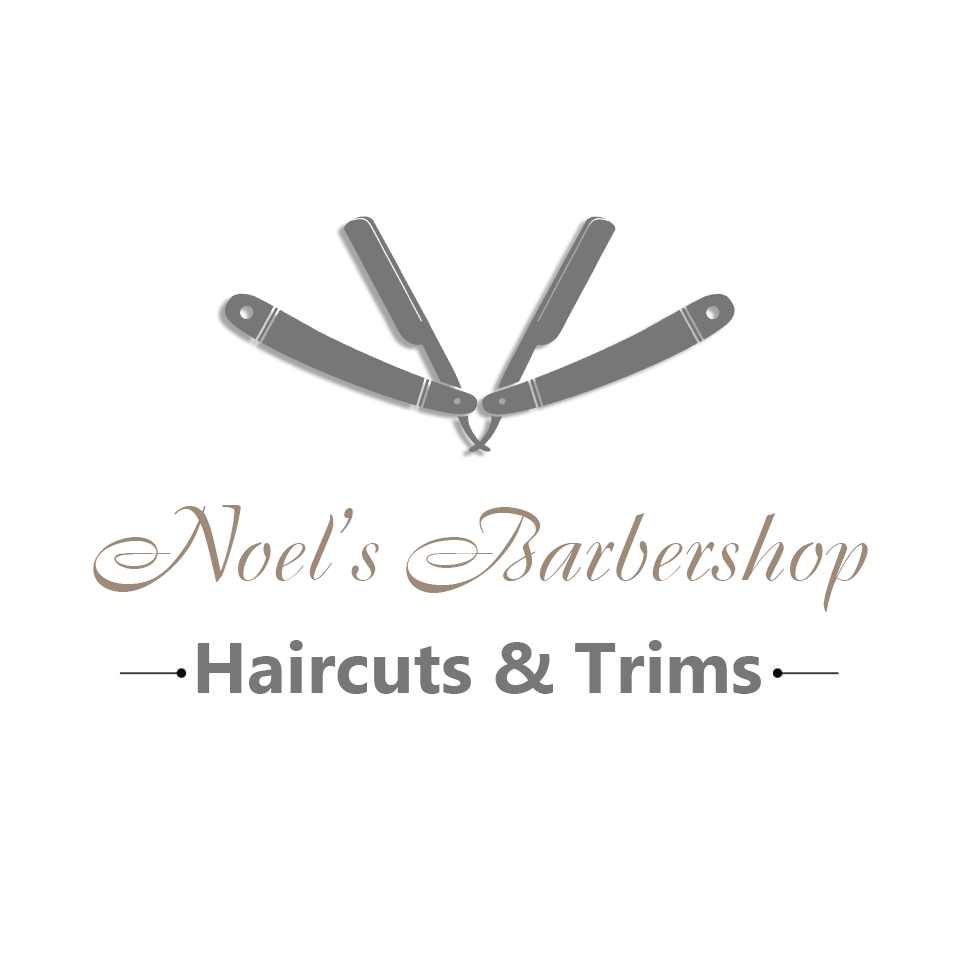
<style>
.page{position:relative;width:960px;height:959px;background:#ffffff}
.page>*{position:absolute;margin:0}
.t1{font:100px "Boulevard";color:#9e8a78}
.t2{font:72px "Gadugi-Bold";color:#777777}
</style>
<div class="page">
<p class="t1" style="left:93px;top:505px;width:775px;height:107px">Noel’s Barbershop</p>
<p class="t2" style="left:197px;top:640px;width:564px;height:54px">Haircuts &amp; Trims</p>
</div>
